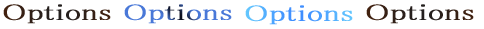
<style>
.page{position:relative;width:484px;height:29px;background:#ffffff}
.page>*{position:absolute;margin:0}
.t1{font:22.8px "MS-PMincho";color:#302018;font-weight:bold;scale:1.4 1}
.t2{font:22.8px "MS-PMincho";color:#4978d8;font-weight:bold;scale:1.4 1}
.t3{font:22.8px "MS-PMincho";font-weight:bold;scale:1.4 1}
</style>
<div class="page">
<p class="t1" style="left:3px;top:4px;width:108px;height:20px">Options</p>
<p class="t2" style="left:124px;top:4px;width:108px;height:20px">Options</p>
<p class="t3" style="left:245px;top:5px;width:108px;height:20px">Options</p>
<p class="t1" style="left:366px;top:4px;width:108px;height:20px">Options</p>
</div>
